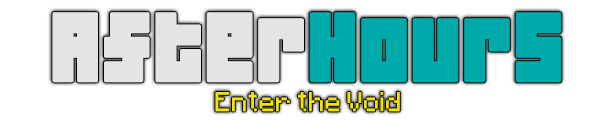
<style>
.page{position:relative;width:615px;height:126px;background:#ffffff}
.page>*{position:absolute;margin:0}
.t1{font:86px "04b19";color:#e4e4e4;font-weight:bold}
.t2{font:86px "04b19";color:#00aaaa;font-weight:bold}
.t3{font:22px "Minecraftia-Regular";color:#f0e400}
</style>
<div class="page">
<p class="t1" style="left:52px;top:12px;width:510px;height:71px">After<span class="t2">Hours</span></p>
<p class="t3" style="left:215px;top:92px;width:185px;height:20px">Enter the Void</p>
</div>
